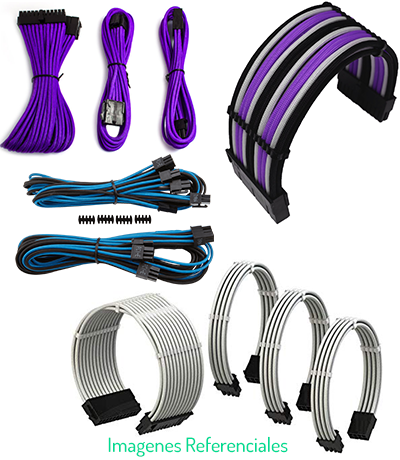
<style>
.page{position:relative;width:400px;height:460px;background:#ffffff}
.page>*{position:absolute;margin:0}
.t1{font:19.7px "Dosis-Medium";color:#00db93}
</style>
<div class="page">
<p class="t1" style="left:108px;top:436px;width:180px;height:21px">Imagenes Referenciales</p>
</div>
